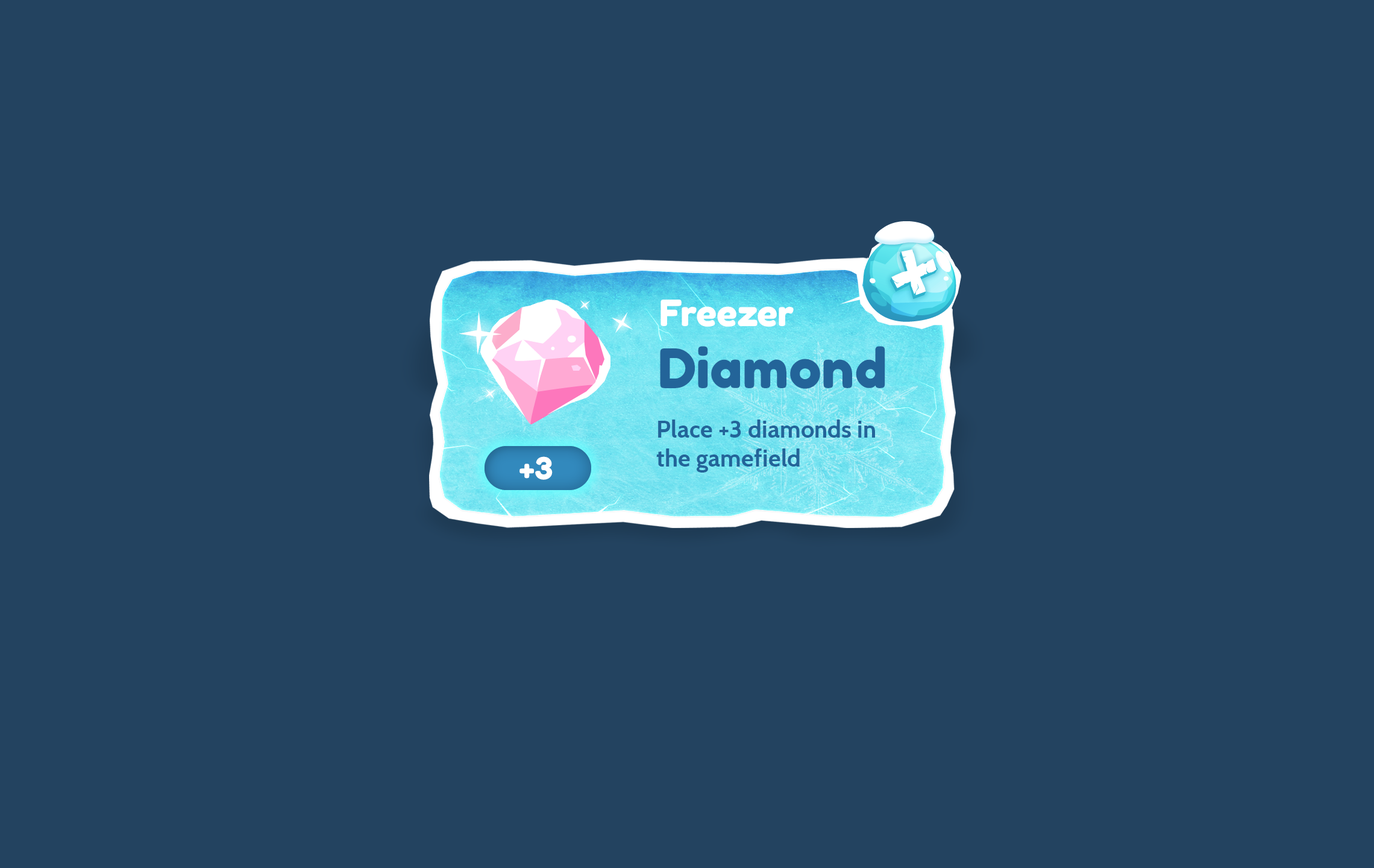
<style>
.page{position:relative;width:1374px;height:868px;background:#234360}
.page>*{position:absolute;margin:0}
.t1{font:36.2px "FredokaOne-Regular";color:#ffffff}
.t2{font:54.2px "FredokaOne-Regular";color:#236499}
.t3{font:24.1px "Cabin-Bold";color:#236499}
.t4{font:30.1px "FredokaOne-Regular";color:#ffffff}
</style>
<div class="page">
<p class="t1" style="left:661px;top:300px;width:133px;height:27px">Freezer</p>
<p class="t2" style="left:660px;top:346px;width:225px;height:43px">Diamond</p>
<p class="t3" style="left:656px;top:419px;width:219px;height:53px">Place +3 diamonds in <br>the gamefield</p>
<p class="t4" style="left:519px;top:456px;width:34px;height:24px">+3</p>
</div>
